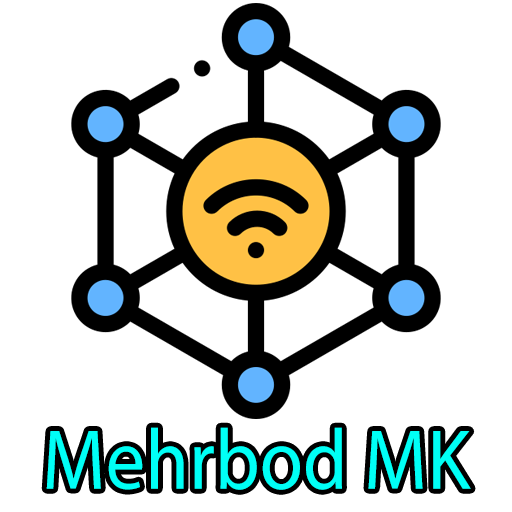
<style>
.page{position:relative;width:512px;height:512px;background:#ffffff}
.page>*{position:absolute;margin:0}
.t1{font:85.7px "MyriadPro-Regular";color:#00fff6;scale:0.92 1}
</style>
<div class="page">
<p class="t1" style="left:46px;top:427px;width:425px;height:63px">Mehrbod MK</p>
</div>
